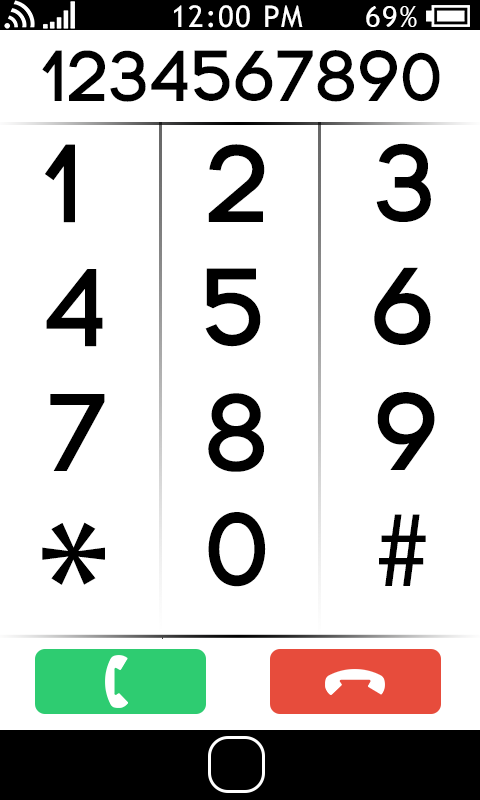
<style>
.page{position:relative;width:480px;height:800px;background:#ffffff}
.page>*{position:absolute;margin:0}
.t1{font:30px "TrebuchetMS";letter-spacing:0.05em;color:#ffffff}
.t2{font:72px "Code-Bold";letter-spacing:0.05em;color:#000000}
.t3{font:110px "Code-Bold";letter-spacing:0.05em;color:#000000}
.t4{font:110px "MyriadPro-Regular";letter-spacing:0.05em;color:#000000}
.t5{font:177px "MyriadPro-Regular";letter-spacing:0.05em;color:#000000}
</style>
<div class="page">
<p class="t1" style="left:174px;top:5px;width:129px;height:23px">12:00 PM</p>
<p class="t1" style="left:366px;top:6px;width:51px;height:21px">69%</p>
<p class="t2" style="left:42px;top:50px;width:398px;height:52px">1234567890</p>
<p class="t3" style="left:45px;top:144px;width:30px;height:79px">1</p>
<p class="t3" style="left:208px;top:144px;width:57px;height:78px">2</p>
<p class="t3" style="left:376px;top:143px;width:55px;height:79px">3</p>
<p class="t3" style="left:46px;top:269px;width:57px;height:78px">4</p>
<p class="t3" style="left:205px;top:268px;width:56px;height:79px">5</p>
<p class="t3" style="left:374px;top:267px;width:57px;height:78px">6</p>
<p class="t3" style="left:50px;top:394px;width:55px;height:77px">7</p>
<p class="t3" style="left:208px;top:393px;width:57px;height:79px">8</p>
<p class="t3" style="left:377px;top:392px;width:58px;height:78px">9</p>
<p class="t3" style="left:208px;top:512px;width:58px;height:75px">0</p>
<p class="t4" style="left:379px;top:514px;width:47px;height:72px">#</p>
<p class="t5" style="left:42px;top:522px;width:63px;height:63px">*</p>
</div>
